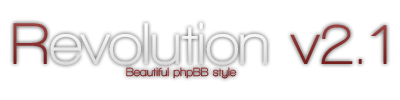
<style>
.page{position:relative;width:400px;height:100px;background:#ffffff}
.page>*{position:absolute;margin:0}
.t1{font:60px "WalkwayBold";color:#ffffff}
.t2{font:60px "WalkwayBold";color:#882424}
.t3{font:12px "WalkwayBold";color:#882424}
</style>
<div class="page">
<p class="t1" style="left:13px;top:22px;width:374px;height:43px"><span class="t2">R</span>evolution <span class="t2">v2.1</span></p>
<p class="t3" style="left:126px;top:67px;width:111px;height:12px">Beautiful phpBB style</p>
</div>
